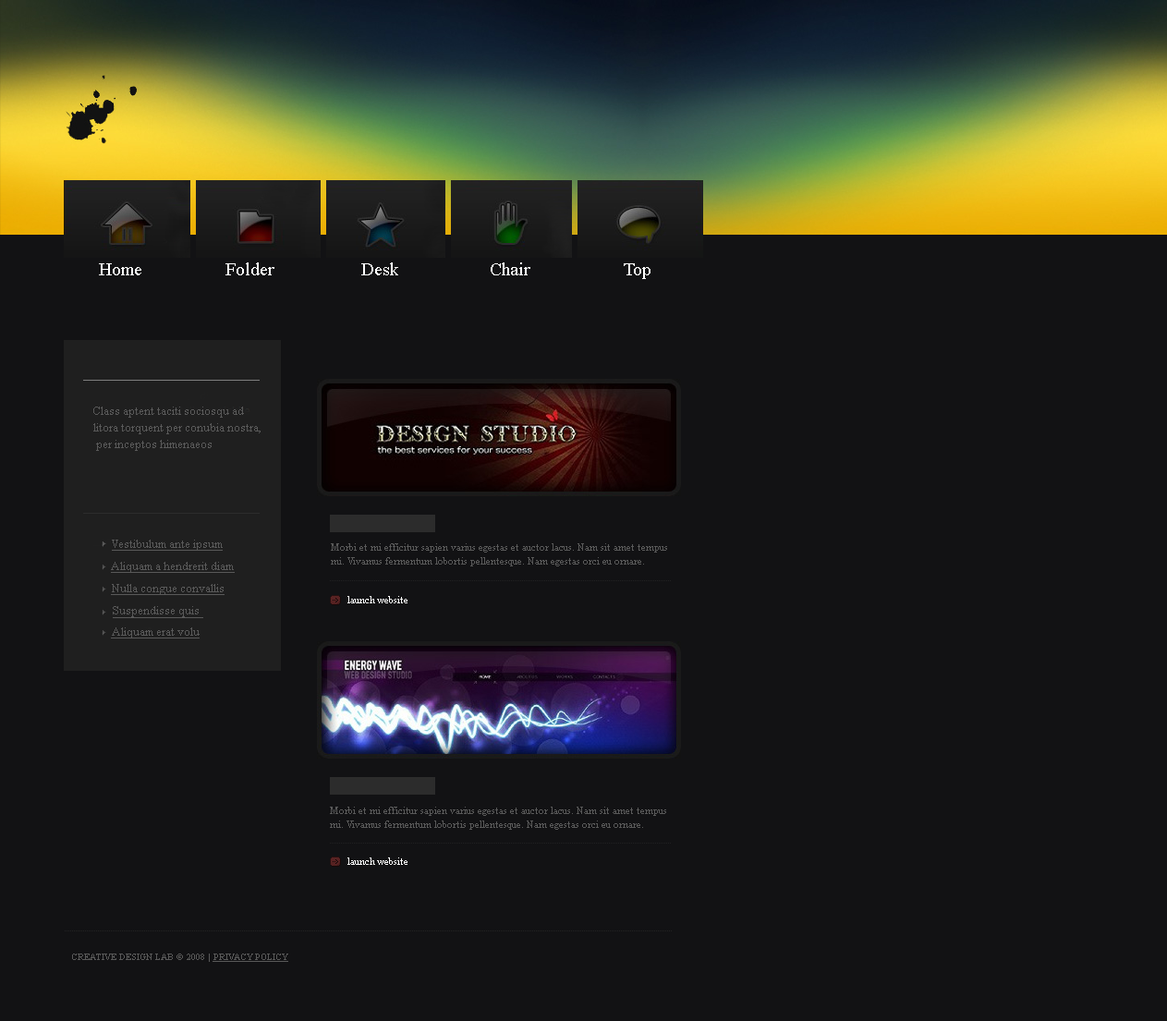
<style>
.page{position:relative;width:1167px;height:1021px;background:#121214}
.page>*{position:absolute;margin:0}
.t1{font:18.5px "TimesNewRomanPSMT";color:#ffffff}
.t2{font:12px/16.6px "TimesNewRomanPSMT";color:#595959}
.t3{font:12px "TimesNewRomanPSMT";color:#595959;text-decoration:underline}
.t4{font:12px "TimesNewRomanPSMT";color:#595959}
.t5{font:10.2px/13.9px "TimesNewRomanPSMT";color:#595959}
.t6{font:10.2px "TimesNewRomanPSMT";color:#ffffff}
.t7{font:9.2px "TimesNewRomanPSMT";color:#595959}
.t8{font:9.2px "TimesNewRomanPSMT";color:#595959;text-decoration:underline}
</style>
<div class="page">
<p class="t1" style="left:99px;top:263px;width:42px;height:12px">Home</p>
<p class="t1" style="left:226px;top:263px;width:49px;height:12px">Folder</p>
<p class="t1" style="left:361px;top:263px;width:37px;height:12px">Desk</p>
<p class="t1" style="left:491px;top:263px;width:40px;height:12px">Chair</p>
<p class="t1" style="left:624px;top:263px;width:27px;height:16px">Top</p>
<p class="t2" style="left:93px;top:407px;width:168px;height:44px">Class aptent taciti sociosqu ad <br>litora torquent per conubia nostra,<br> per inceptos himenaeos</p>
<p class="t3" style="left:112px;top:540px;width:111px;height:11px"><span class="t4"> </span>Vestibulum ante ipsum</p>
<p class="t5" style="left:331px;top:544px;width:336px;height:23px">Morbi et mi efficitur sapien varius egestas et auctor lacus. Nam sit amet tempus <br>mi. Vivamus fermentum lobortis pellentesque. Nam egestas orci eu ornare.</p>
<p class="t3" style="left:111px;top:562px;width:124px;height:11px">Aliquam a hendrerit diam</p>
<p class="t3" style="left:111px;top:584px;width:114px;height:11px">Nulla congue convallis</p>
<p class="t6" style="left:348px;top:596px;width:60px;height:8px">launch website</p>
<p class="t3" style="left:113px;top:606px;width:90px;height:12px">Suspendisse quis</p>
<p class="t3" style="left:111px;top:628px;width:89px;height:11px">Aliquam erat volu</p>
<p class="t5" style="left:330px;top:807px;width:336px;height:23px">Morbi et mi efficitur sapien varius egestas et auctor lacus. Nam sit amet tempus <br>mi. Vivamus fermentum lobortis pellentesque. Nam egestas orci eu ornare.</p>
<p class="t6" style="left:348px;top:858px;width:60px;height:7px">launch website</p>
<p class="t7" style="left:72px;top:954px;width:216px;height:8px">CREATIVE DESIGN LAB © 2008 | <span class="t8">PRIVACY POLICY</span></p>
</div>
